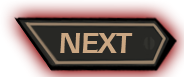
<style>
.page{position:relative;width:184px;height:77px}
.page>*{position:absolute;margin:0}
.t1{font:30px "037-CAI978";color:#cba783}
</style>
<div class="page">
<p class="t1" style="left:60px;top:33px;width:73px;height:20px">NEXT</p>
</div>
